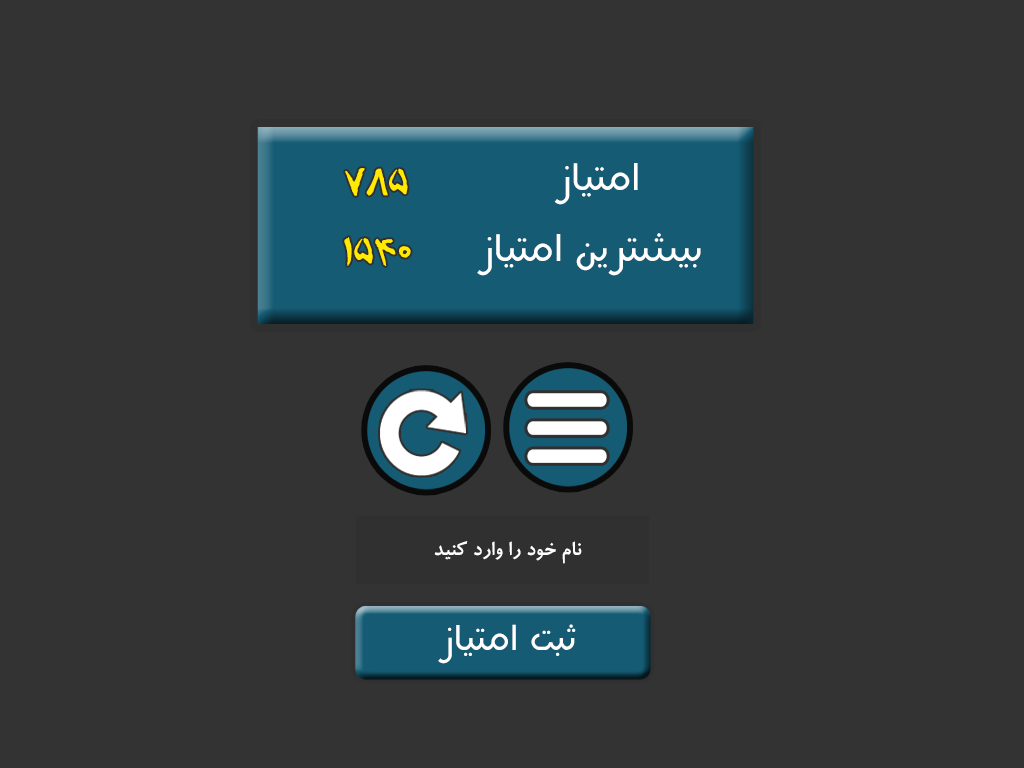
<style>
.page{position:relative;width:1024px;height:768px;background:#333333}
.page>*{position:absolute;margin:0}
.t1{font:41.6px "AAfsaneh";color:#ffea00}
.t2{font:41.6px "BHelal";color:#ffffff}
.t3{font:22.2px "BRoyaBold";color:#ffffff}
.t4{font:38.9px "BHelal";color:#ffffff}
</style>
<div class="page">
<p class="t1" style="left:345px;top:168px;width:63px;height:28px">785</p>
<p class="t2" style="left:554px;top:163px;width:84px;height:42px">امتیاز</p>
<p class="t2" style="left:477px;top:233px;width:224px;height:43px">بیشترین امتیاز</p>
<p class="t1" style="left:344px;top:237px;width:67px;height:29px">1540</p>
<p class="t3" style="left:434px;top:541px;width:148px;height:23px">نام خود را وارد کنید</p>
<p class="t4" style="left:438px;top:624px;width:138px;height:40px">ثبت امتیاز</p>
</div>
